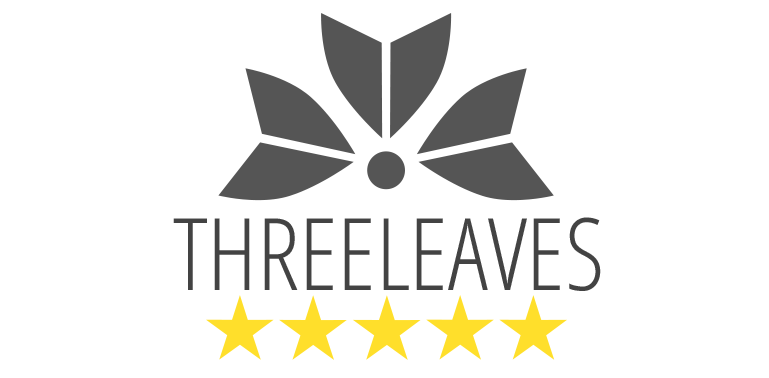
<style>
.page{position:relative;width:769px;height:378px;background:#ffffff}
.page>*{position:absolute;margin:0}
.t1{font:100px "OpenSans-CondensedLight";color:#434343}
</style>
<div class="page">
<p class="t1" style="left:173px;top:217px;width:428px;height:74px">THREELEAVES</p>
</div>
